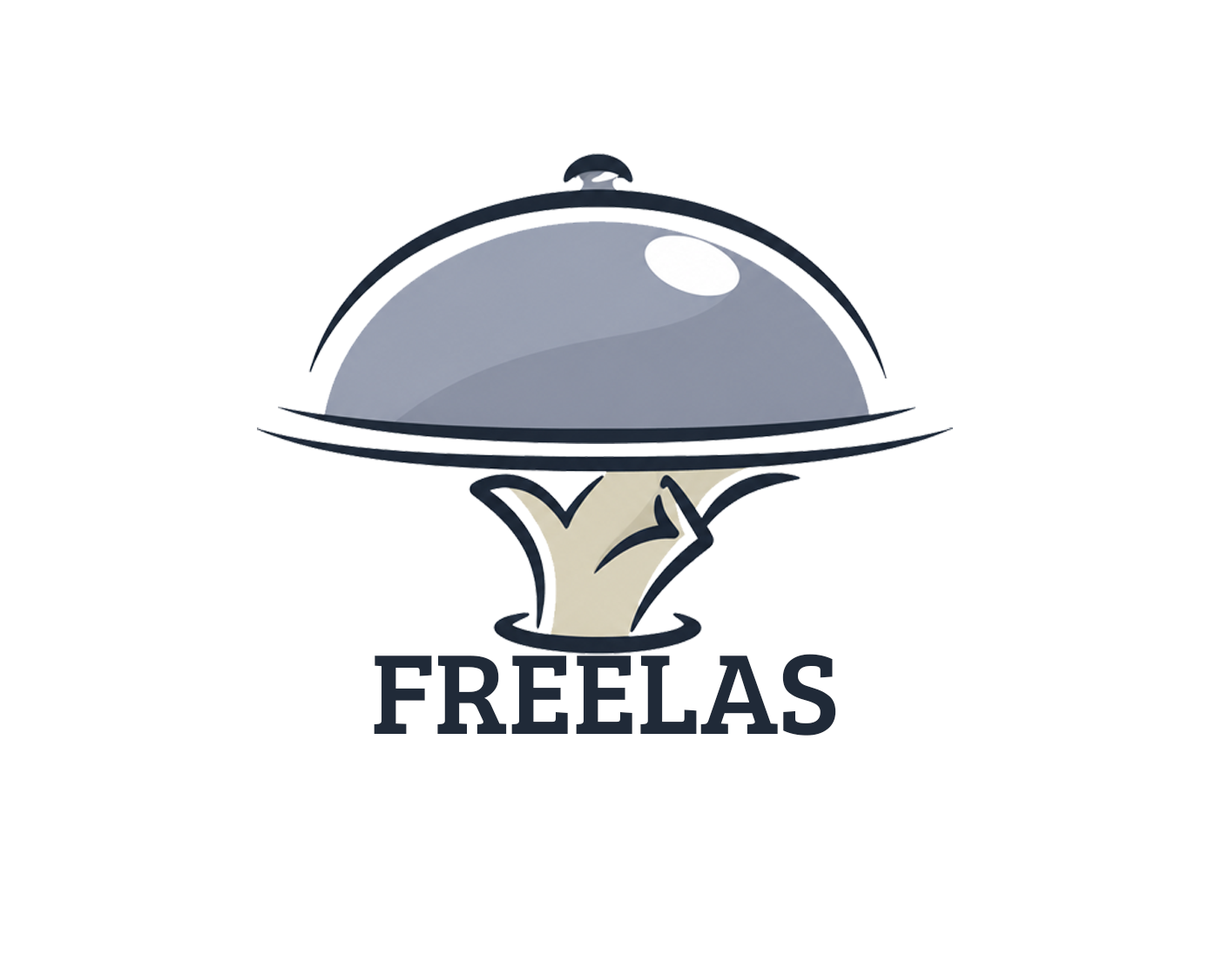
<style>
.page{position:relative;width:1223px;height:975px;background:#ffffff}
.page>*{position:absolute;margin:0}
.t1{font:117.8px "BreeSerif-Regular";color:#202a38}
</style>
<div class="page">
<p class="t1" style="left:374px;top:654px;width:462px;height:82px">FREELAS</p>
</div>
